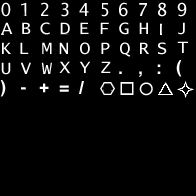
<style>
.page{position:relative;width:196px;height:196px;background:#000000}
.page>*{position:absolute;margin:0}
.t1{font:18px "LucidaConsole";color:#ffffff}
</style>
<div class="page">
<p class="t1" style="left:1px;top:2px;width:10px;height:15px">0</p>
<p class="t1" style="left:41px;top:2px;width:8px;height:14px">2</p>
<p class="t1" style="left:61px;top:2px;width:8px;height:15px">3</p>
<p class="t1" style="left:79px;top:3px;width:10px;height:13px">4</p>
<p class="t1" style="left:101px;top:3px;width:8px;height:14px">5</p>
<p class="t1" style="left:119px;top:2px;width:9px;height:15px">6</p>
<p class="t1" style="left:139px;top:3px;width:8px;height:13px">7</p>
<p class="t1" style="left:158px;top:2px;width:9px;height:15px">8</p>
<p class="t1" style="left:177px;top:2px;width:10px;height:15px">9</p>
<p class="t1" style="left:1px;top:22px;width:12px;height:12px">A</p>
<p class="t1" style="left:22px;top:22px;width:9px;height:12px">B</p>
<p class="t1" style="left:40px;top:22px;width:10px;height:13px">C</p>
<p class="t1" style="left:60px;top:22px;width:10px;height:12px">D</p>
<p class="t1" style="left:80px;top:22px;width:9px;height:12px">E</p>
<p class="t1" style="left:100px;top:22px;width:9px;height:12px">F</p>
<p class="t1" style="left:119px;top:22px;width:10px;height:13px">G</p>
<p class="t1" style="left:139px;top:22px;width:9px;height:12px">H</p>
<p class="t1" style="left:177px;top:41px;width:11px;height:12px">T</p>
<p class="t1" style="left:2px;top:42px;width:9px;height:12px">K</p>
<p class="t1" style="left:20px;top:42px;width:9px;height:12px">L</p>
<p class="t1" style="left:42px;top:42px;width:10px;height:12px">M</p>
<p class="t1" style="left:59px;top:42px;width:9px;height:12px">N</p>
<p class="t1" style="left:80px;top:42px;width:10px;height:13px">O</p>
<p class="t1" style="left:101px;top:42px;width:9px;height:12px">P</p>
<p class="t1" style="left:120px;top:42px;width:11px;height:15px">Q</p>
<p class="t1" style="left:140px;top:42px;width:9px;height:12px">R</p>
<p class="t1" style="left:158px;top:42px;width:9px;height:13px">S</p>
<p class="t1" style="left:1px;top:62px;width:10px;height:13px">U</p>
<p class="t1" style="left:20px;top:62px;width:11px;height:12px">V</p>
<p class="t1" style="left:41px;top:62px;width:11px;height:12px">W</p>
<p class="t1" style="left:59px;top:61px;width:11px;height:12px">X</p>
<p class="t1" style="left:79px;top:61px;width:12px;height:12px">Y</p>
<p class="t1" style="left:101px;top:61px;width:10px;height:12px">Z</p>
</div>
